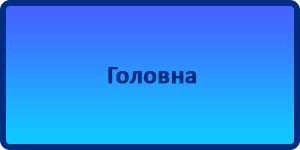
<style>
.page{position:relative;width:300px;height:150px}
.page>*{position:absolute;margin:0}
.t1{font:25px "Calibri-Bold";color:#002d7f;font-weight:bold}
</style>
<div class="page">
<p class="t1" style="left:108px;top:67px;width:89px;height:17px">Головна</p>
</div>
